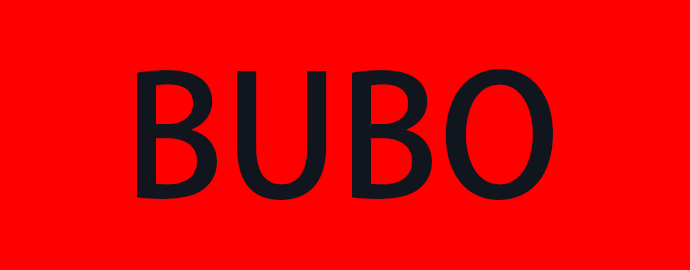
<style>
.page{position:relative;width:690px;height:270px;background:#ff0000}
.page>*{position:absolute;margin:0}
.t1{font:165.8px "AdobeHeitiStd-Regular";color:#11151e}
</style>
<div class="page">
<p class="t1" style="left:137px;top:69px;width:416px;height:131px">BUBO</p>
</div>
